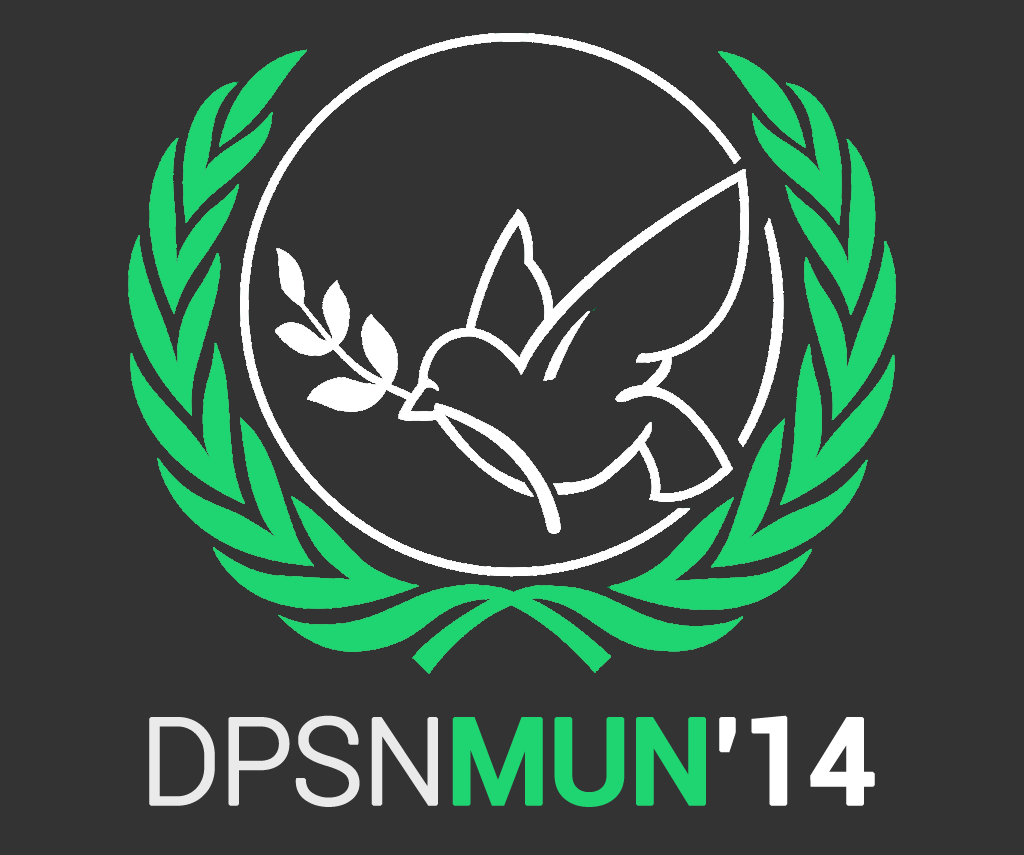
<style>
.page{position:relative;width:1024px;height:855px;background:#333333}
.page>*{position:absolute;margin:0}
.t1{font:120px "Roboto-Light";letter-spacing:-0.04em;color:#eaeaea;font-weight:bold}
.t2{font:120px "Roboto-Medium";letter-spacing:-0.04em;color:#1fd571;font-weight:bold}
.t3{font:120px "Roboto-Medium";letter-spacing:-0.04em;color:#ffffff;font-weight:bold}
</style>
<div class="page">
<p class="t1" style="left:149px;top:715px;width:726px;height:92px">DPSN<span class="t2">MUN</span><span class="t3">’14</span></p>
</div>
